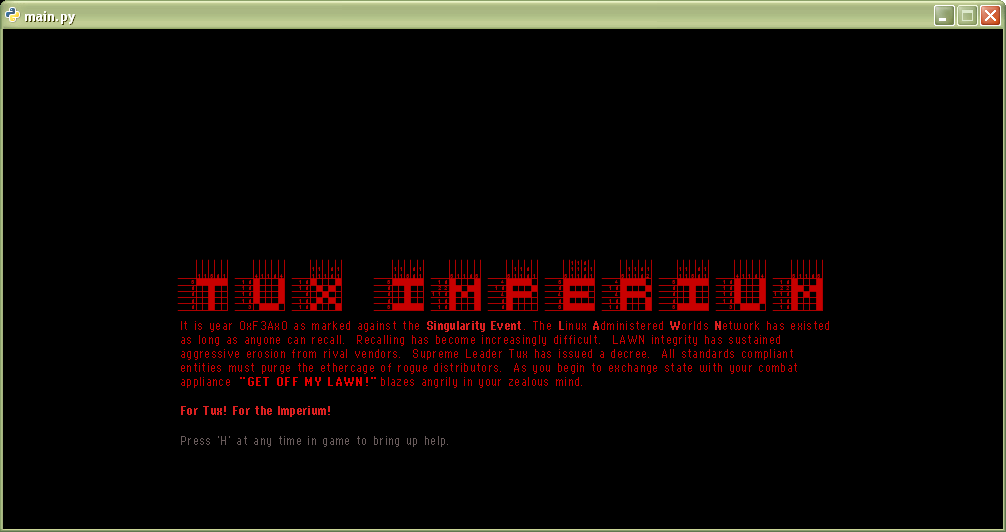
<style>
.page{position:relative;width:1006px;height:532px;background:#000000}
.page>*{position:absolute;margin:0}
.t1{font:8px/14px "Copy0956";letter-spacing:0.042em;color:#c80000}
.t2{font:8px/14px "Copy0956";letter-spacing:0.042em;color:#000000}
.t3{font:8px "Copy0965";letter-spacing:0.042em;color:#dc2121}
.t4{font:8px "Copy0966";letter-spacing:0.042em;color:#e10101}
.t5{font:8px "Copy0956";letter-spacing:0.042em;color:#685b5b}
</style>
<div class="page">
<p class="t1" style="left:181px;top:321px;width:648px;height:67px">It is year 0xF3Ax0 as marked against the <span class="t2">Singularity Event</span>. The <span class="t2">L</span>inux <span class="t2">A</span>dministered <span class="t2">W</span>orlds <span class="t2">N</span>etwork has existed<br>as long as anyone can recall.  Recalling has become increasingly difficult.  LAWN integrity has sustained<br>aggressive erosion from rival vendors.  Supreme Leader Tux has issued a decree.  All standards compliant<br>entities must purge the ethercage of rogue distributors.  As you begin to exchange state with your combat<br>appliance                            blazes angrily in your zealous mind.</p>
<p class="t3" style="left:427px;top:321px;width:94px;height:11px">Singularity Event</p>
<p class="t3" style="left:559px;top:321px;width:5px;height:9px">L</p>
<p class="t3" style="left:593px;top:321px;width:6px;height:9px">A</p>
<p class="t3" style="left:670px;top:321px;width:10px;height:9px">W</p>
<p class="t3" style="left:715px;top:321px;width:6px;height:9px">N</p>
<p class="t4" style="left:240px;top:377px;width:136px;height:9px">"GET OFF MY LAWN!"</p>
<p class="t3" style="left:181px;top:406px;width:149px;height:11px">For Tux! For the Imperium!</p>
<p class="t5" style="left:181px;top:436px;width:267px;height:11px">Press 'H' at any time in game to bring up help.</p>
</div>
